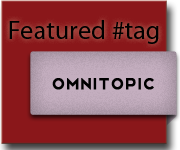
<style>
.page{position:relative;width:180px;height:150px;background:#8a171a}
.page>*{position:absolute;margin:0}
.t1{font:26.3px "MyriadPro-Regular";color:#000000}
.t2{font:20px "Telegrafico";color:#000000;font-weight:bold}
</style>
<div class="page">
<p class="t1" style="left:9px;top:20px;width:150px;height:24px">Featured #tag</p>
<p class="t2" style="left:52px;top:78px;width:102px;height:12px">Omnitopic</p>
</div>
